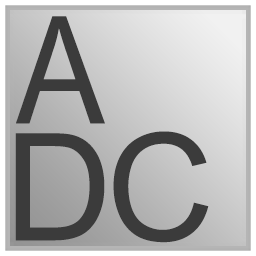
<style>
.page{position:relative;width:256px;height:256px}
.page>*{position:absolute;margin:0}
.t1{font:149.6px "ArialMT";letter-spacing:-0.05em;color:#3b3b3b;scale:0.89 1}
.t2{font:149.3px "ArialMT";letter-spacing:-0.04em;color:#3b3b3b}
</style>
<div class="page">
<p class="t1" style="left:16px;top:16px;width:89px;height:108px">A</p>
<p class="t2" style="left:15px;top:131px;width:194px;height:112px">DC</p>
</div>
